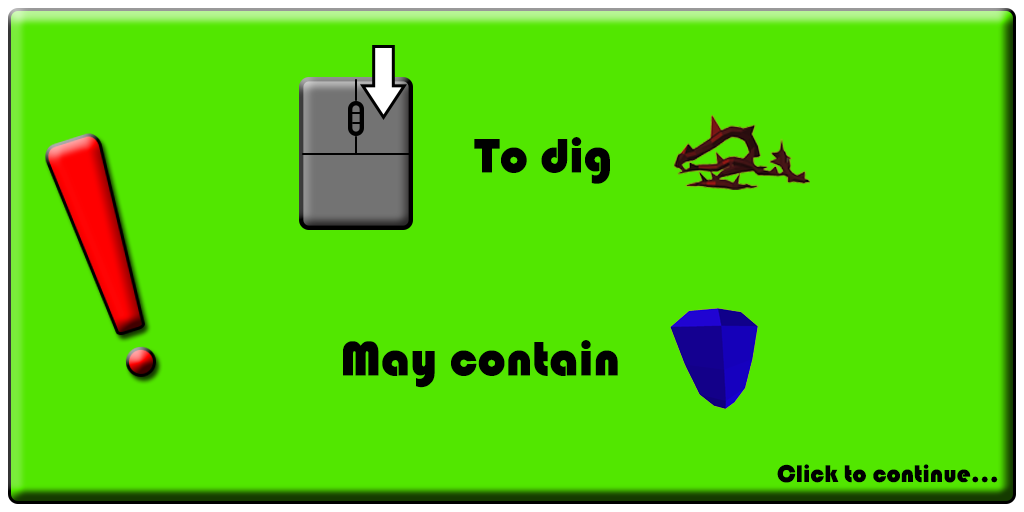
<style>
.page{position:relative;width:1024px;height:512px;background:#52e700}
.page>*{position:absolute;margin:0}
.t1{font:50px "Bauhaus93";color:#000000}
.t2{font:25px "Bauhaus93";color:#000000}
</style>
<div class="page">
<p class="t1" style="left:474px;top:137px;width:136px;height:47px">To dig</p>
<p class="t1" style="left:343px;top:340px;width:275px;height:48px">May contain</p>
<p class="t2" style="left:777px;top:464px;width:221px;height:19px">Click to continue...</p>
</div>
